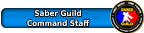
<style>
.page{position:relative;width:144px;height:33px;background:#ffffff}
.page>*{position:absolute;margin:0}
.t1{font:8px "DejaVuSansCondensed-Bold";color:#ffffff}
</style>
<div class="page">
<p class="t1" style="left:27px;top:9px;width:63px;height:18px;text-align:center">Saber Guild<br>Command Staff</p>
</div>
